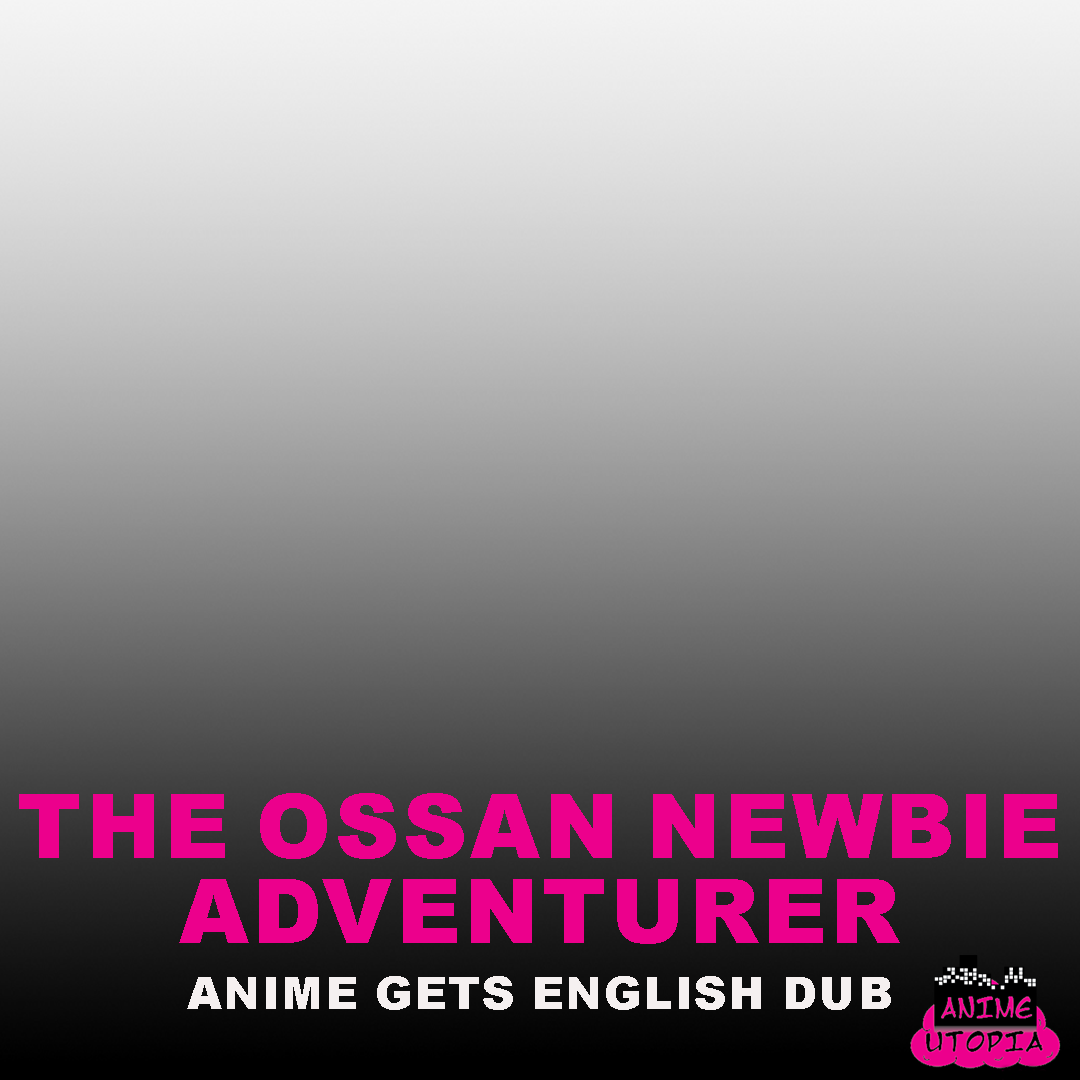
<style>
.page{position:relative;width:1080px;height:1080px}
.page>*{position:absolute;margin:0}
.t1{font:90.1px "Arial-Black";color:#ec008c;text-transform:uppercase}
.t2{font:45px "Arial-Black";color:#f5f0f0;text-transform:uppercase}
</style>
<div class="page">
<p class="t1" style="left:19px;top:793px;width:1039px;height:151px">The Ossan Newbie Adventurer</p>
<p class="t2" style="left:187px;top:976px;width:704px;height:34px">Anime Gets English Dub</p>
</div>
